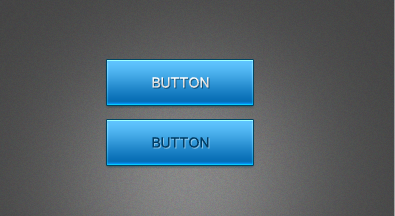
<style>
.page{position:relative;width:395px;height:216px}
.page>*{position:absolute;margin:0}
.t1{font:14px "ArialMT";color:#e7e7e7;text-transform:uppercase}
.t2{font:14px "ArialMT";color:#003c64;text-transform:uppercase}
</style>
<div class="page">
<p class="t1" style="left:152px;top:77px;width:57px;height:11px">Button</p>
<p class="t2" style="left:152px;top:137px;width:57px;height:11px">Button</p>
</div>
